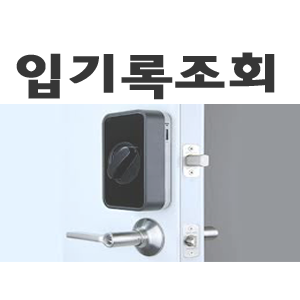
<style>
.page{position:relative;width:300px;height:300px;background:#ffffff}
.page>*{position:absolute;margin:0}
.t1{font:48px "HaanYGodic25";color:#363636;font-weight:bold;scale:1.2 1}
</style>
<div class="page">
<p class="t1" style="left:16px;top:52px;width:259px;height:48px">입기록조회</p>
</div>
